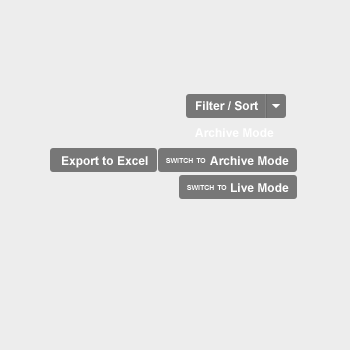
<style>
.page{position:relative;width:350px;height:350px;background:#ededed}
.page>*{position:absolute;margin:0}
.t1{font:12px "Arial-BoldMT";color:#ffffff}
.t2{font:10px "Arial-BoldMT";color:#ffffff;font-variant:small-caps}
</style>
<div class="page">
<p class="t1" style="left:196px;top:101px;width:62px;height:10px">Filter / Sort</p>
<p class="t1" style="left:195px;top:128px;width:79px;height:9px">Archive Mode</p>
<p class="t1" style="left:62px;top:156px;width:86px;height:12px">Export to Excel</p>
<p class="t2" style="left:166px;top:158px;width:40px;height:5px">switch to</p>
<p class="t1" style="left:210px;top:156px;width:79px;height:9px">Archive Mode</p>
<p class="t2" style="left:187px;top:185px;width:40px;height:5px">switch to</p>
<p class="t1" style="left:231px;top:183px;width:58px;height:9px">Live Mode</p>
</div>
